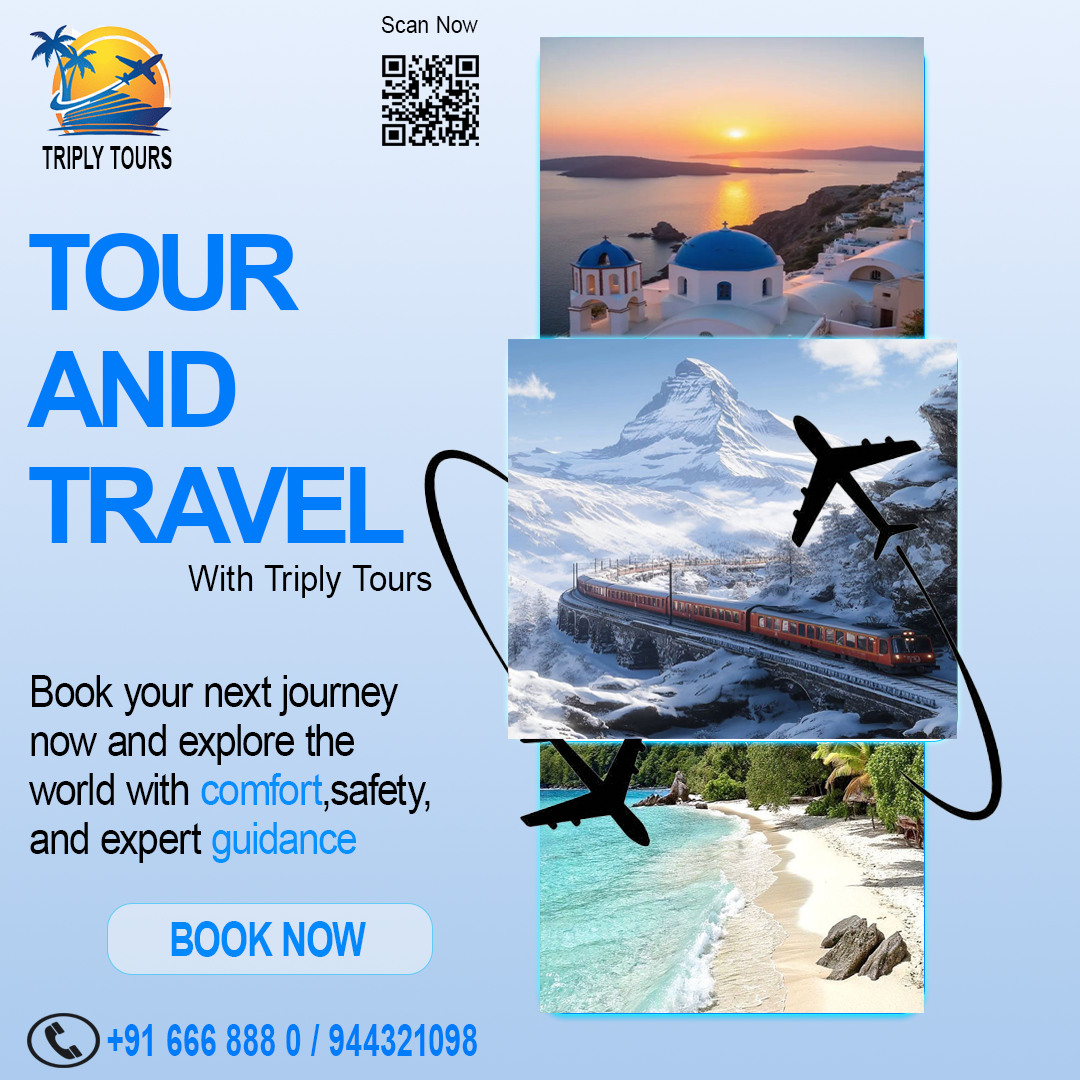
<style>
.page{position:relative;width:1080px;height:1080px}
.page>*{position:absolute;margin:0}
.t1{font:23.6px "ArialMT";letter-spacing:0.01em;color:#020202;scale:0.91 1}
.t2{font:31.8px "Arial-BoldMT";letter-spacing:0.01em;color:#020202;scale:0.58 1}
.t3{font:105.8px/116.4px "Arial-BoldMT";letter-spacing:-0.06em;color:#007cfa}
.t4{font:35.7px "ArialMT";letter-spacing:0.02em;color:#000000;scale:0.92 1}
.t5{font:44.5px/49px "ArialMT";letter-spacing:-0.02em;color:#000000;scale:0.88 1}
.t6{font:44.5px/49px "ArialMT";letter-spacing:-0.02em;color:#098efe;scale:0.88 1}
.t7{font:44.5px/49px "ArialMT";letter-spacing:-0.02em;color:#0592fe;scale:0.88 1}
.t8{font:47.3px "Arial-BoldMT";letter-spacing:-0.02em;color:#0189fc;scale:0.76 1}
.t9{font:44.6px "Arial-BoldMT";letter-spacing:0.02em;color:#007cfa;scale:0.66 1}
</style>
<div class="page">
<p class="t1" style="left:381px;top:16px;width:97px;height:17px">Scan Now</p>
<p class="t2" style="left:42px;top:146px;width:130px;height:23px">TRIPLY TOURS</p>
<p class="t3" style="left:27px;top:233px;width:377px;height:310px">TOUR <br>AND<br>TRAVEL</p>
<p class="t4" style="left:188px;top:565px;width:244px;height:33px">With Triply Tours</p>
<p class="t5" style="left:28px;top:675px;width:402px;height:188px">Book your next journey<br>now and explore the<br>world with <span class="t6">comfort</span>,safety,<br>and expert <span class="t7">guidance</span></p>
<p class="t8" style="left:171px;top:921px;width:195px;height:36px">BOOK NOW</p>
<p class="t9" style="left:107px;top:1024px;width:370px;height:32px">+91 666 888 0 / 944321098</p>
</div>
